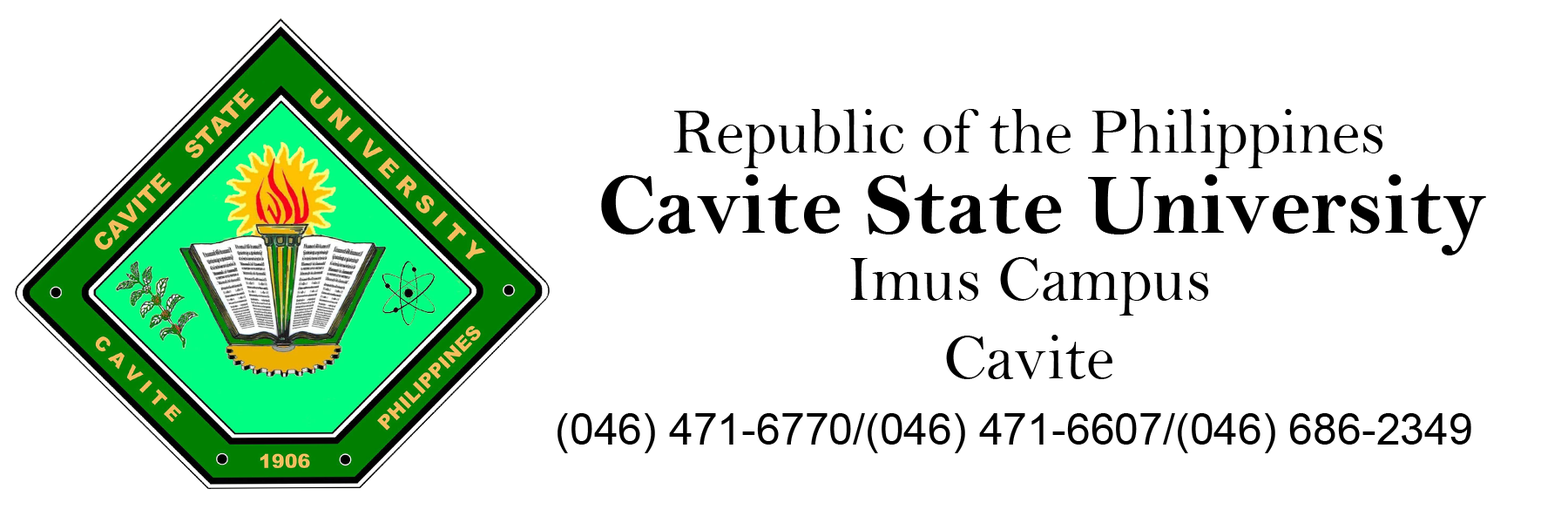
<style>
.page{position:relative;width:1568px;height:523px;background:#ffffff}
.page>*{position:absolute;margin:0}
.t1{font:65.3px "BellMT";color:#000000}
.t2{font:87.1px "BellMTBold";color:#000000}
.t3{font:43.6px "ArialMT";color:#000000}
</style>
<div class="page">
<p class="t1" style="left:673px;top:109px;width:709px;height:59px">Republic of the Philippines</p>
<p class="t2" style="left:601px;top:174px;width:885px;height:81px">Cavite State University</p>
<p class="t1" style="left:850px;top:257px;width:358px;height:122px;text-align:center">Imus Campus<br>Cavite</p>
<p class="t3" style="left:558px;top:413px;width:913px;height:40px">(046) 471-6770/(046) 471-6607/(046) 686-2349</p>
</div>
